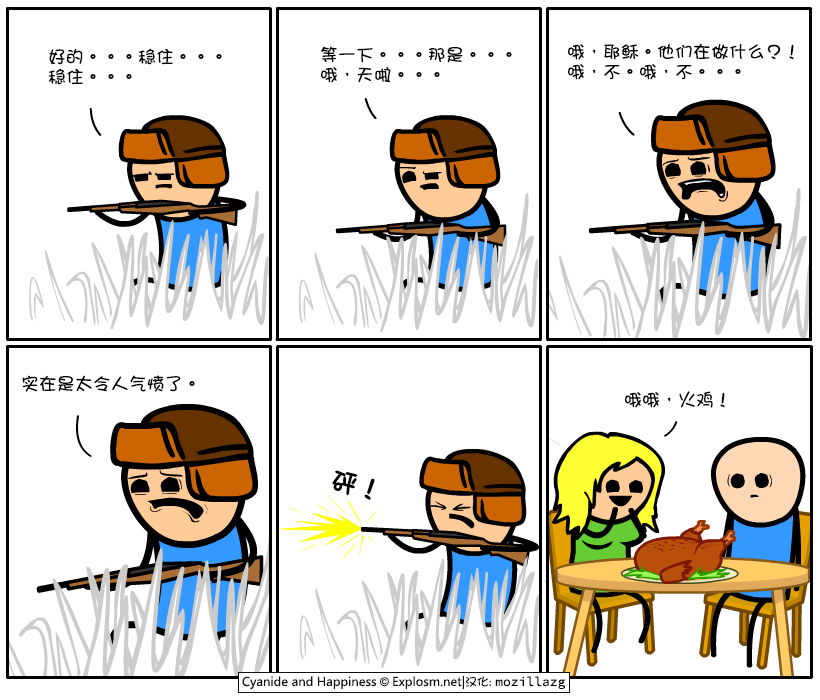
<style>
.page{position:relative;width:820px;height:700px;background:#ffffff}
.page>*{position:absolute;margin:0}
.t1{font:18px/20px "DFGirl";color:#000000}
.t2{font:18px "DFGirl";color:#000000}
.t3{font:26px "DFGirl";color:#000000;font-weight:bold}
</style>
<div class="page">
<p class="t1" style="left:48px;top:48px;width:174px;height:37px">好的。。。稳住。。。<br>稳住。。。</p>
<p class="t1" style="left:321px;top:46px;width:191px;height:37px">等一下。。。那是。。。<br>哦，天啦。。。</p>
<p class="t1" style="left:568px;top:43px;width:226px;height:37px">哦，耶稣。他们在做什么？！<br>哦，不。哦，不。。。</p>
<p class="t2" style="left:22px;top:375px;width:173px;height:17px">实在是太令人气愤了。</p>
<p class="t2" style="left:625px;top:391px;width:100px;height:17px">哦哦，火鸡！</p>
<p class="t3" style="left:332px;top:470px;width:43px;height:30px;rotate:12deg">砰！</p>
</div>
